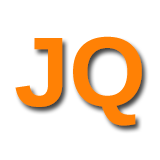
<style>
.page{position:relative;width:160px;height:160px;background:#ffffff}
.page>*{position:absolute;margin:0}
.t1{font:99px "LiberationSans-Bold";color:#ff8105}
</style>
<div class="page">
<p class="t1" style="left:15px;top:36px;width:127px;height:90px">JQ</p>
</div>
